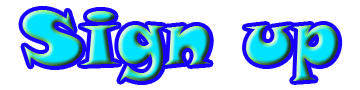
<style>
.page{position:relative;width:360px;height:90px;background:#ffffff}
.page>*{position:absolute;margin:0}
.t1{font:74.3px "SnapITC-Regular"}
</style>
<div class="page">
<p class="t1" style="left:22px;top:10px;width:317px;height:71px">Sign up</p>
</div>
